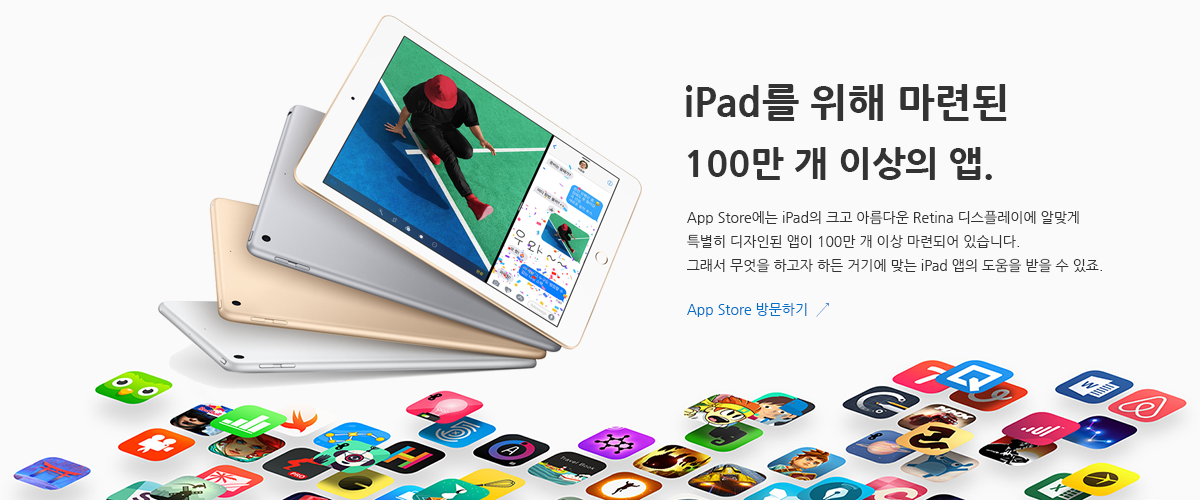
<style>
.page{position:relative;width:1200px;height:500px;background:#fafafa}
.page>*{position:absolute;margin:0}
.t1{font:36px/60px "NanumGothicExtraBold";color:#333333}
.t2{font:40px/60px "NanumGothicExtraBold";color:#333333}
.t3{font:14px/24px "NanumGothic";color:#333333}
.t4{font:14px "NanumGothic";color:#0070c9}
</style>
<div class="page">
<p class="t1" style="left:686px;top:84px;width:321px;height:96px"><span class="t2">iPad를 위해 마련된 <br></span>100만 개 이상의 앱.</p>
<p class="t3" style="left:687px;top:210px;width:415px;height:63px">App Store에는 iPad의 크고 아름다운 Retina 디스플레이에 알맞게 <br>특별히 디자인된 앱이 100만 개 이상 마련되어 있습니다.<br>그래서 무엇을 하고자 하든 거기에 맞는 iPad 앱의 도움을 받을 수 있죠.</p>
<p class="t4" style="left:687px;top:302px;width:142px;height:15px">App Store 방문하기  ↗</p>
</div>
